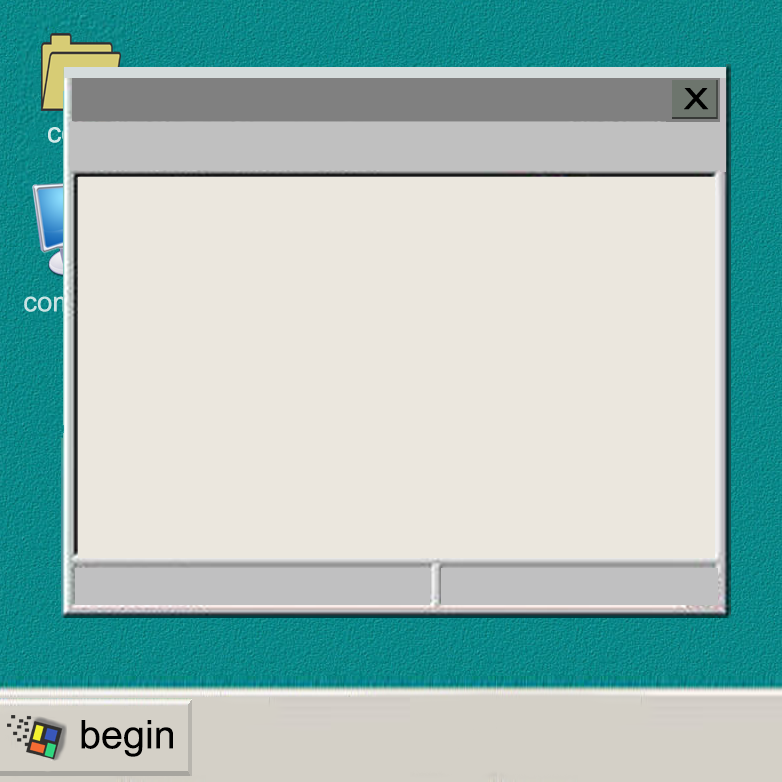
<style>
.page{position:relative;width:782px;height:782px;background:#ebe7de}
.page>*{position:absolute;margin:0}
.t1{font:39.5px "ArialMT";color:#000000}
</style>
<div class="page">
<p class="t1" style="left:81px;top:720px;width:92px;height:37px">begin</p>
</div>
